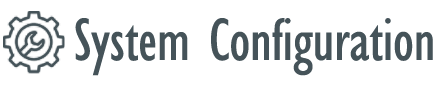
<style>
.page{position:relative;width:445px;height:92px;background:#ffffff}
.page>*{position:absolute;margin:0}
.t1{font:62px "GillSansMT-Condensed";letter-spacing:-0.01em;color:#455359}
</style>
<div class="page">
<p class="t1" style="left:75px;top:18px;width:358px;height:58px">System Configuration</p>
</div>
